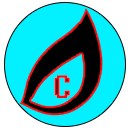
<style>
.page{position:relative;width:128px;height:128px;background:#02f0ff}
.page>*{position:absolute;margin:0}
.t1{font:32.3px "Fixedsys";color:#fb0b0b}
</style>
<div class="page">
<p class="t1" style="left:54px;top:75px;width:16px;height:23px">C</p>
</div>
